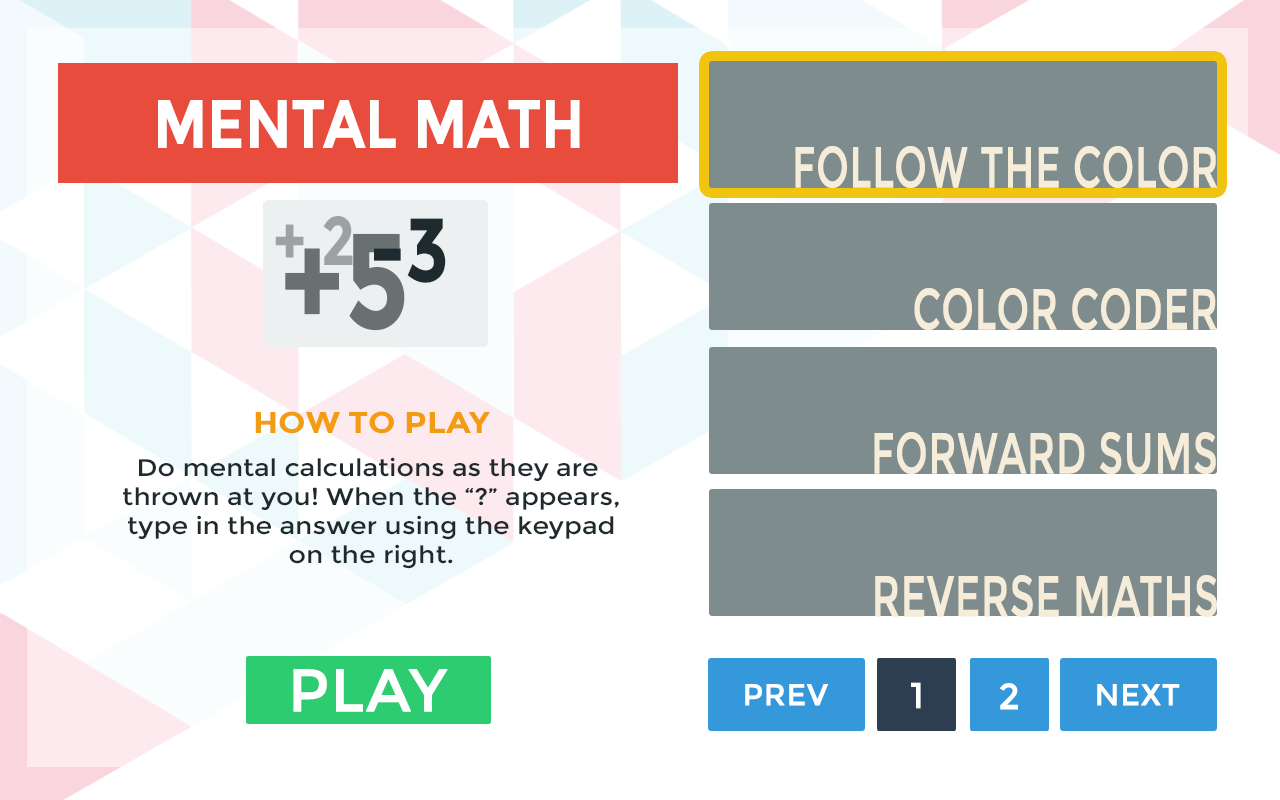
<style>
.page{position:relative;width:1280px;height:800px;background:#ffffff}
.page>*{position:absolute;margin:0}
.t1{font:68.4px "Montserrat-Bold";color:#ffffff;scale:0.83 1}
.t2{font:57.6px "Montserrat-Regular";color:#f5ecd9;font-weight:bold;scale:0.67 1}
.t3{font:68.4px "Montserrat-Bold";color:#9ca1a2;scale:0.83 1}
.t4{font:91px "Montserrat-Bold";color:#1e2a2e;scale:0.83 1}
.t5{font:135.5px "Montserrat-Bold";color:#697072;scale:0.81 1}
.t6{font:24px "Montserrat-Regular";color:#1e2a2e;scale:1.11 1}
.t7{font:30px "Montserrat-Bold";color:#f39c12;scale:1.11 1}
.t8{font:60px "Montserrat-Regular";color:#ffffff;font-weight:bold}
.t9{font:30px "Montserrat-Regular";color:#ffffff;font-weight:bold}
.t10{font:36px "Montserrat-Regular";color:#ffffff;font-weight:bold}
</style>
<div class="page">
<p class="t1" style="left:158px;top:100px;width:422px;height:48px">MENTAL MATH</p>
<p class="t2" style="left:795px;top:146px;width:422px;height:42px">FOLLOW THE COLOR</p>
<p class="t3" style="left:275px;top:216px;width:78px;height:49px">+ 2</p>
<p class="t4" style="left:374px;top:218px;width:72px;height:65px">-3</p>
<p class="t5" style="left:285px;top:233px;width:120px;height:98px">+5</p>
<p class="t2" style="left:914px;top:288px;width:303px;height:42px">COLOR CODER</p>
<p class="t6" style="left:123px;top:411px;width:496px;height:158px;text-align:center"><span class="t7">HOW TO PLAY<br><br></span>Do mental calculations as they are <br>thrown at you! When the “?” appears,<br>type in the answer using the keypad<br>on the right.</p>
<p class="t2" style="left:874px;top:432px;width:342px;height:42px">FORWARD SUMS</p>
<p class="t2" style="left:875px;top:575px;width:342px;height:42px">REVERSE MATHS</p>
<p class="t8" style="left:293px;top:669px;width:155px;height:43px">PLAY</p>
<p class="t9" style="left:745px;top:684px;width:83px;height:22px">PREV</p>
<p class="t10" style="left:911px;top:682px;width:10px;height:27px">1</p>
<p class="t10" style="left:1000px;top:683px;width:18px;height:27px">2</p>
<p class="t9" style="left:1097px;top:684px;width:83px;height:22px">NEXT</p>
</div>
